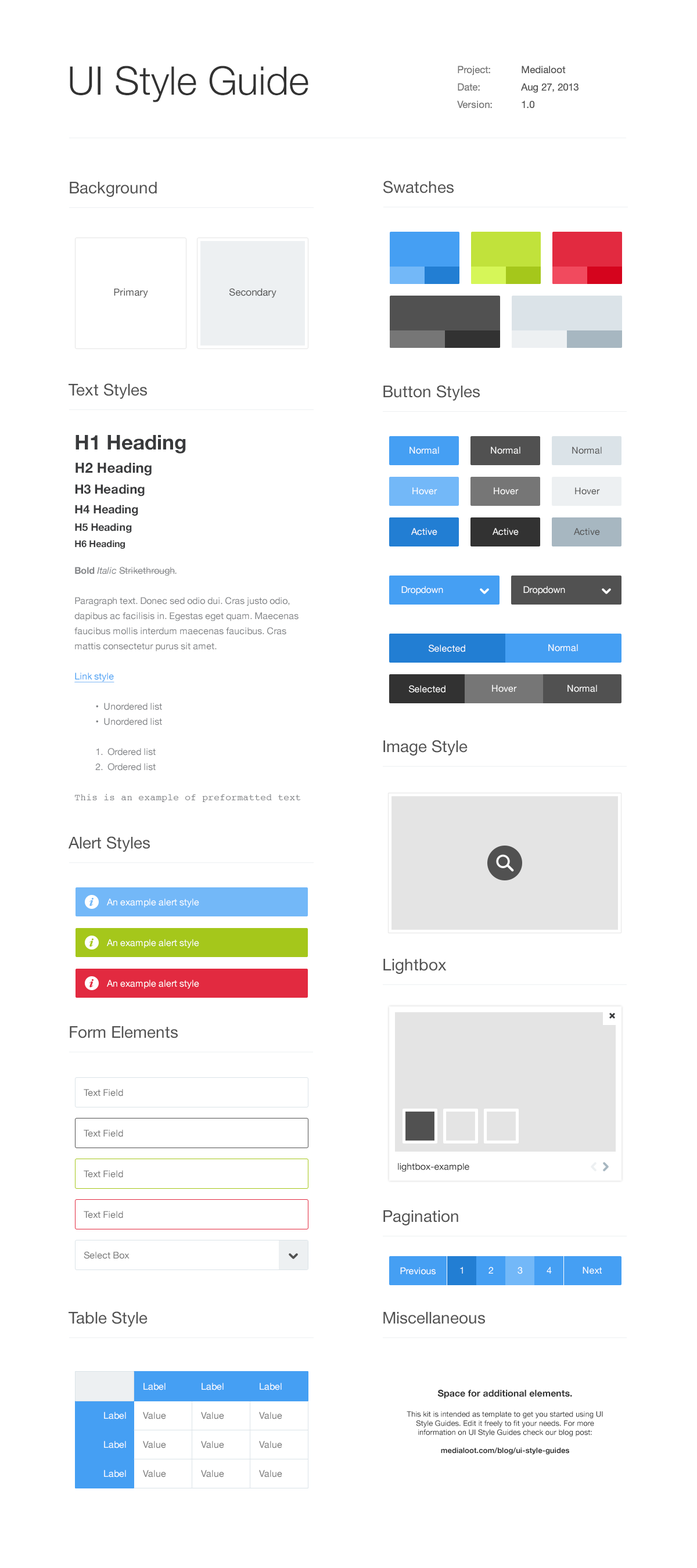
<style>
.page{position:relative;width:697px;height:1568px;background:#ffffff}
.page>*{position:absolute;margin:0}
.t1{font:39.5px "HelveticaNeue-Light";color:#323232}
.t2{font:9.9px/17.4px "HelveticaNeue";color:#767676}
.t3{font:9.9px/17.4px "HelveticaNeue";color:#515151}
.t4{font:16.3px "HelveticaNeue";color:#515151}
.t5{font:9.9px "HelveticaNeue";color:#515151}
.t6{font:9.3px/15.1px "HelveticaNeue";color:#818386}
.t7{font:20.3px/22.1px "HelveticaNeue-Bold";color:#393a3c}
.t8{font:13.9px/23.2px "HelveticaNeue-Bold";color:#393a3c}
.t9{font:12.8px/20.9px "HelveticaNeue-Bold";color:#393a3c}
.t10{font:11.6px/19.7px "HelveticaNeue-Bold";color:#393a3c}
.t11{font:10.5px/17.4px "HelveticaNeue-Bold";color:#393a3c}
.t12{font:9.3px/16.3px "HelveticaNeue-Bold";color:#393a3c}
.t13{font:9.3px/15.1px "HelveticaNeue-Bold";color:#818386}
.t14{font:9.3px/15.1px "HelveticaNeue-Italic";color:#818386}
.t15{font:9.3px/15.1px "HelveticaNeue";color:#459ff3;text-decoration:underline}
.t16{font:9.3px/15.1px "Courier";color:#818386}
.t17{font:9.3px "HelveticaNeue";color:#ffffff}
.t18{font:9.3px "HelveticaNeue";color:#515151}
.t19{font:9.3px "HelveticaNeue";color:#767676}
.t20{font:9.3px "HelveticaNeue";color:#323232}
.t21{font:7.5px "HelveticaNeue";color:#323232}
.t22{font:9.3px "HelveticaNeue-Bold";color:#323232}
.t23{font:7.5px "HelveticaNeue-Bold";color:#323232}
</style>
<div class="page">
<p class="t1" style="left:70px;top:66px;width:238px;height:36px">UI Style Guide</p>
<p class="t2" style="left:457px;top:66px;width:35px;height:42px">Project:<br>Date:<br>Version:</p>
<p class="t3" style="left:521px;top:66px;width:57px;height:42px">Medialoot<br>Aug 27, 2013<br>1.0</p>
<p class="t4" style="left:70px;top:182px;width:87px;height:15px">Background</p>
<p class="t4" style="left:383px;top:181px;width:71px;height:12px">Swatches</p>
<p class="t5" style="left:114px;top:288px;width:34px;height:10px">Primary</p>
<p class="t5" style="left:229px;top:288px;width:47px;height:10px">Secondary</p>
<p class="t4" style="left:69px;top:383px;width:78px;height:16px">Text Styles</p>
<p class="t4" style="left:383px;top:385px;width:97px;height:16px">Button Styles</p>
<p class="t6" style="left:74px;top:435px;width:227px;height:367px"><span class="t7">H1 Heading<br></span><span class="t8">H2 Heading<br></span><span class="t9">H3 Heading <br></span><span class="t10">H4 Heading <br></span><span class="t11">H5 Heading <br></span><span class="t12">H6 Heading <br><br></span><span class="t13">Bold </span><span class="t14">Italic </span>Strikethrough<span class="t14">. <br></span><br>Paragraph text. Donec sed odio dui. Cras justo odio, dapibus ac facilisis in. Egestas eget quam. Maecenas faucibus mollis interdum maecenas faucibus. Cras mattis consectetur purus sit amet.<br><br><span class="t15">Link style<br><br></span> •  Unordered list<br> •  Unordered list<br><br> 1.  Ordered list<br> 2.  Ordered list<br><br><span class="t16">This is an example of preformatted text</span></p>
<p class="t17" style="left:409px;top:447px;width:30px;height:7px">Normal</p>
<p class="t17" style="left:491px;top:447px;width:29px;height:7px">Normal</p>
<p class="t18" style="left:572px;top:447px;width:30px;height:7px">Normal</p>
<p class="t17" style="left:412px;top:487px;width:25px;height:8px">Hover</p>
<p class="t17" style="left:494px;top:487px;width:25px;height:8px">Hover</p>
<p class="t18" style="left:575px;top:487px;width:25px;height:8px">Hover</p>
<p class="t17" style="left:411px;top:528px;width:26px;height:7px">Active</p>
<p class="t17" style="left:492px;top:528px;width:27px;height:7px">Active</p>
<p class="t18" style="left:574px;top:528px;width:26px;height:7px">Active</p>
<p class="t17" style="left:401px;top:586px;width:42px;height:9px">Dropdown</p>
<p class="t17" style="left:523px;top:586px;width:42px;height:9px">Dropdown</p>
<p class="t17" style="left:429px;top:645px;width:36px;height:7px">Selected</p>
<p class="t17" style="left:548px;top:644px;width:30px;height:8px">Normal</p>
<p class="t17" style="left:409px;top:685px;width:36px;height:8px">Selected</p>
<p class="t17" style="left:492px;top:685px;width:25px;height:7px">Hover</p>
<p class="t17" style="left:567px;top:685px;width:30px;height:7px">Normal</p>
<p class="t4" style="left:383px;top:740px;width:84px;height:16px">Image Style</p>
<p class="t4" style="left:68px;top:836px;width:82px;height:16px">Alert Styles</p>
<p class="t17" style="left:107px;top:898px;width:92px;height:10px">An example alert style</p>
<p class="t17" style="left:107px;top:939px;width:92px;height:9px">An example alert style</p>
<p class="t4" style="left:383px;top:959px;width:64px;height:15px">Lightbox</p>
<p class="t17" style="left:107px;top:980px;width:92px;height:9px">An example alert style</p>
<p class="t4" style="left:70px;top:1026px;width:108px;height:12px">Form Elements</p>
<p class="t19" style="left:84px;top:1089px;width:39px;height:7px">Text Field</p>
<p class="t19" style="left:84px;top:1130px;width:39px;height:7px">Text Field</p>
<p class="t20" style="left:398px;top:1163px;width:71px;height:9px">lightbox-example</p>
<p class="t19" style="left:84px;top:1170px;width:39px;height:8px">Text Field</p>
<p class="t19" style="left:84px;top:1211px;width:39px;height:7px">Text Field</p>
<p class="t4" style="left:383px;top:1210px;width:75px;height:15px">Pagination</p>
<p class="t19" style="left:84px;top:1251px;width:46px;height:8px">Select Box</p>
<p class="t17" style="left:400px;top:1267px;width:36px;height:8px">Previous</p>
<p class="t17" style="left:460px;top:1267px;width:3px;height:7px">1</p>
<p class="t17" style="left:488px;top:1267px;width:5px;height:7px">2</p>
<p class="t17" style="left:517px;top:1267px;width:6px;height:7px">3</p>
<p class="t17" style="left:546px;top:1267px;width:6px;height:7px">4</p>
<p class="t17" style="left:582px;top:1267px;width:20px;height:7px">Next</p>
<p class="t4" style="left:69px;top:1311px;width:79px;height:16px">Table Style</p>
<p class="t4" style="left:383px;top:1312px;width:102px;height:12px">Miscellaneous</p>
<p class="t17" style="left:143px;top:1383px;width:23px;height:7px">Label</p>
<p class="t17" style="left:202px;top:1383px;width:22px;height:7px">Label</p>
<p class="t17" style="left:260px;top:1383px;width:22px;height:7px">Label</p>
<p class="t21" style="left:407px;top:1390px;width:196px;height:65px;text-align:center"><span class="t22">Space for additional elements.<br><br></span>This kit is intended as template to get you started using UI Style Guides. Edit it freely to fit your needs. For more information on UI Style Guides check our blog post:<br><br><span class="t23">medialoot.com/blog/ui-style-guides</span></p>
<p class="t17" style="left:104px;top:1412px;width:22px;height:7px">Label</p>
<p class="t19" style="left:143px;top:1412px;width:23px;height:7px">Value</p>
<p class="t19" style="left:201px;top:1412px;width:23px;height:7px">Value</p>
<p class="t19" style="left:259px;top:1412px;width:23px;height:7px">Value</p>
<p class="t17" style="left:104px;top:1441px;width:22px;height:7px">Label</p>
<p class="t19" style="left:143px;top:1441px;width:23px;height:7px">Value</p>
<p class="t19" style="left:201px;top:1441px;width:23px;height:7px">Value</p>
<p class="t19" style="left:259px;top:1441px;width:23px;height:7px">Value</p>
<p class="t17" style="left:104px;top:1470px;width:22px;height:7px">Label</p>
<p class="t19" style="left:143px;top:1470px;width:23px;height:7px">Value</p>
<p class="t19" style="left:201px;top:1470px;width:23px;height:7px">Value</p>
<p class="t19" style="left:259px;top:1470px;width:23px;height:7px">Value</p>
</div>
